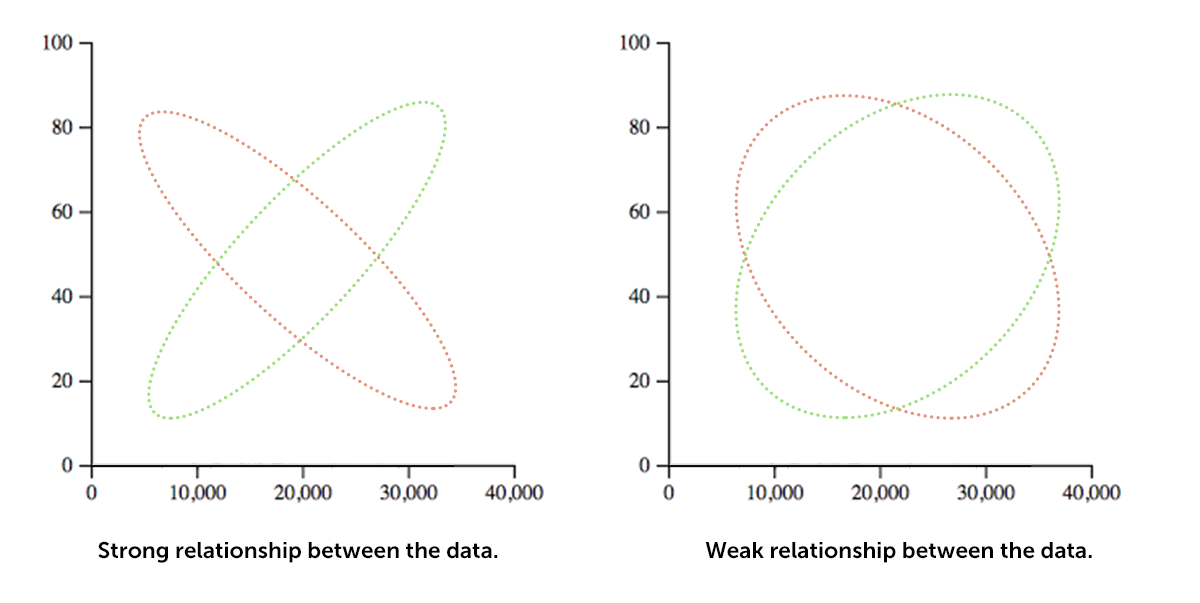
<style>
.page{position:relative;width:1200px;height:603px;background:#ffffff}
.page>*{position:absolute;margin:0}
.t1{font:22.7px "MuseoSans-700";color:#000000}
</style>
<div class="page">
<p class="t1" style="left:98px;top:541px;width:400px;height:22px">Strong relationship between the data.</p>
<p class="t1" style="left:705px;top:542px;width:387px;height:21px">Weak relationship between the data.</p>
</div>
